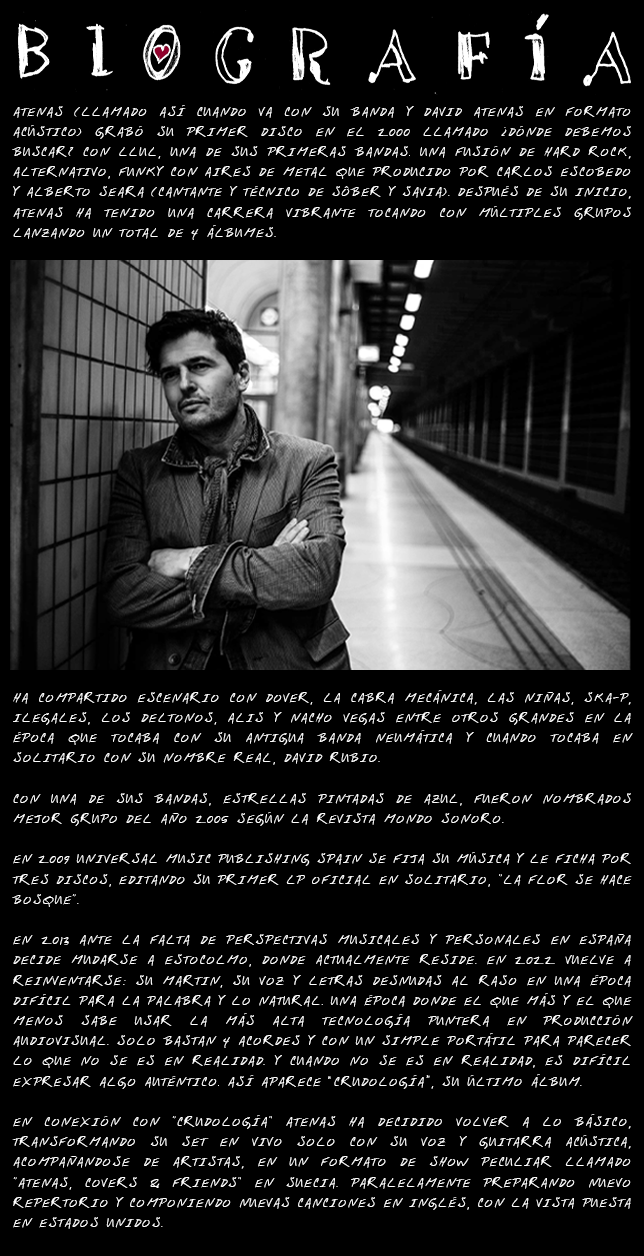
<style>
.page{position:relative;width:644px;height:1256px;background:#000000}
.page>*{position:absolute;margin:0}
.t1{font:14px/20.2px "WinstonsHand-Plain";color:#ffffff;text-transform:uppercase}
</style>
<div class="page">
<p class="t1" style="left:12px;top:105px;width:621px;height:1124px;text-align:justify">Atenas (llamado así cuando va con su banda y David Atenas en formato acústico) grabó su primer disco en el 2000 llamado ¿Dónde debemos buscar? con Llul, una de sus primeras bandas. Una fusión de hard rock, alternativo, funky con aires de metal que producido por Carlos Escobedo y Alberto Seara (cantante y técnico de Sôber y Savia). Después de su inicio, Atenas ha tenido una carrera vibrante tocando con múltiples grupos lanzando un total de 4 álbumes.<br> <br><br><br><br><br><br><br><br><br><br><br><br><br><br><br><br><br><br><br><br><br><br>Ha compartido escenario con Dover, La Cabra Mecánica, Las Niñas, SKA-P, Ilegales, Los Deltonos, Alis y Nacho Vegas entre otros grandes en la época que tocaba con su antigua banda Neumática y cuando tocaba en solitario con su nombre real, David Rubio. <br><br>Con una de sus bandas, Estrellas Pintadas De Azul, fueron nombrados mejor grupo del año 2005 según la revista Mondo Sonoro. <br><br>En 2009 Universal Music Publishing Spain se fija su música y le ficha por tres discos, editando su primer LP oficial en solitario, "La flor se hace bosque". <br><br>En 2013 ante la falta de perspectivas musicales y personales en España decide mudarse a Estocolmo, donde actualmente reside. En 2022 vuelve a reinventarse: su Martin, su voz y letras desnudas al raso en una época difícil para la palabra y lo natural. Una época donde el que más y el que menos sabe usar la más alta tecnología puntera en producción audiovisual. Solo bastan 4 acordes y con un simple portátil para parecer lo que no se es en realidad. Y cuando no se es en realidad, es difícil expresar algo auténtico. Así aparece “Crudología”, su último álbum.<br><br>En conexión con "Crudología" Atenas ha decidido volver a lo básico, transformando su set en vivo solo con su voz y guitarra acústica, acompañandose de artistas, en un formato de show peculiar llamado "Atenas, covers &amp; friends" en Suecia. Paralelamente preparando nuevo repertorio y componiendo nuevas canciones en inglés, con la vista puesta en Estados Unidos.</p>
</div>
